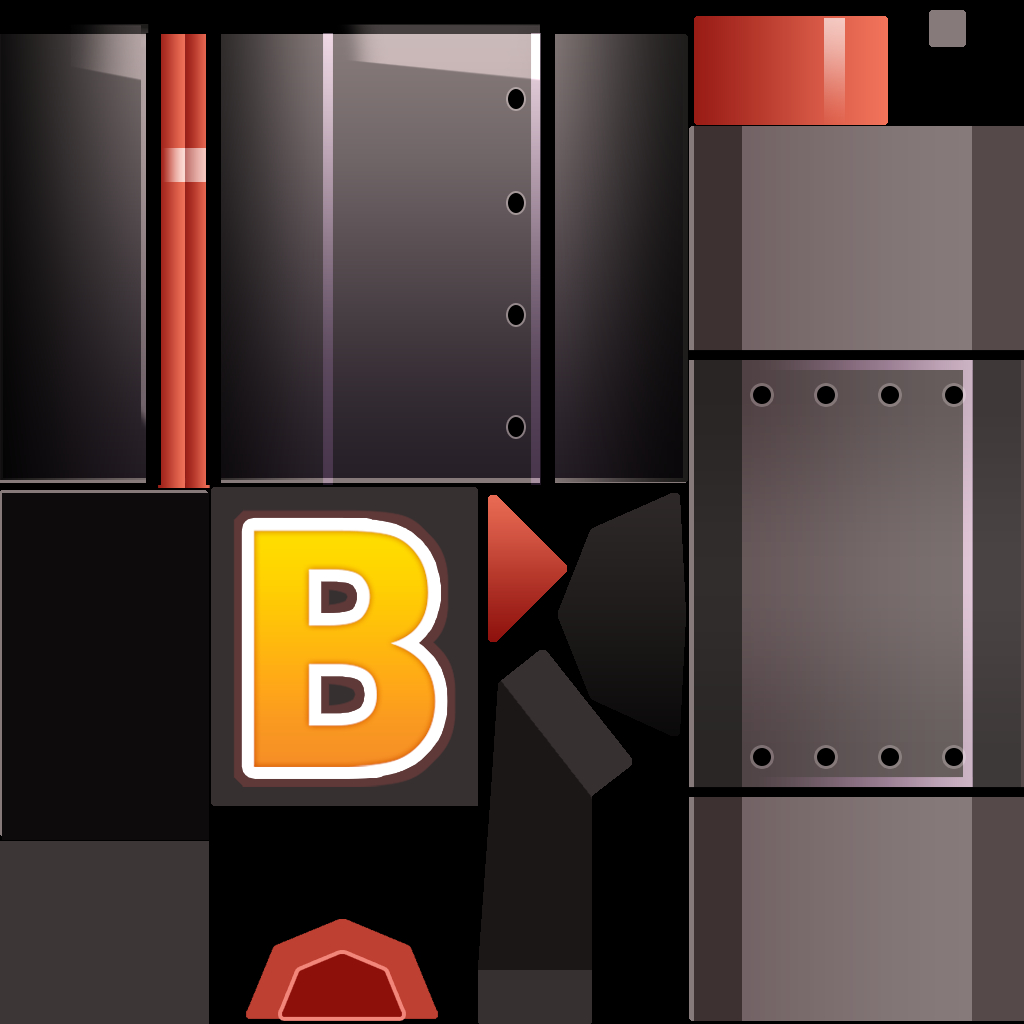
<style>
.page{position:relative;width:1024px;height:1024px}
.page>*{position:absolute;margin:0}
.t1{font:353.4px "FranklinGothic-DemiCond";text-transform:uppercase;scale:1.11 1}
</style>
<div class="page">
<p class="t1" style="left:253px;top:529px;width:183px;height:238px">b</p>
</div>
